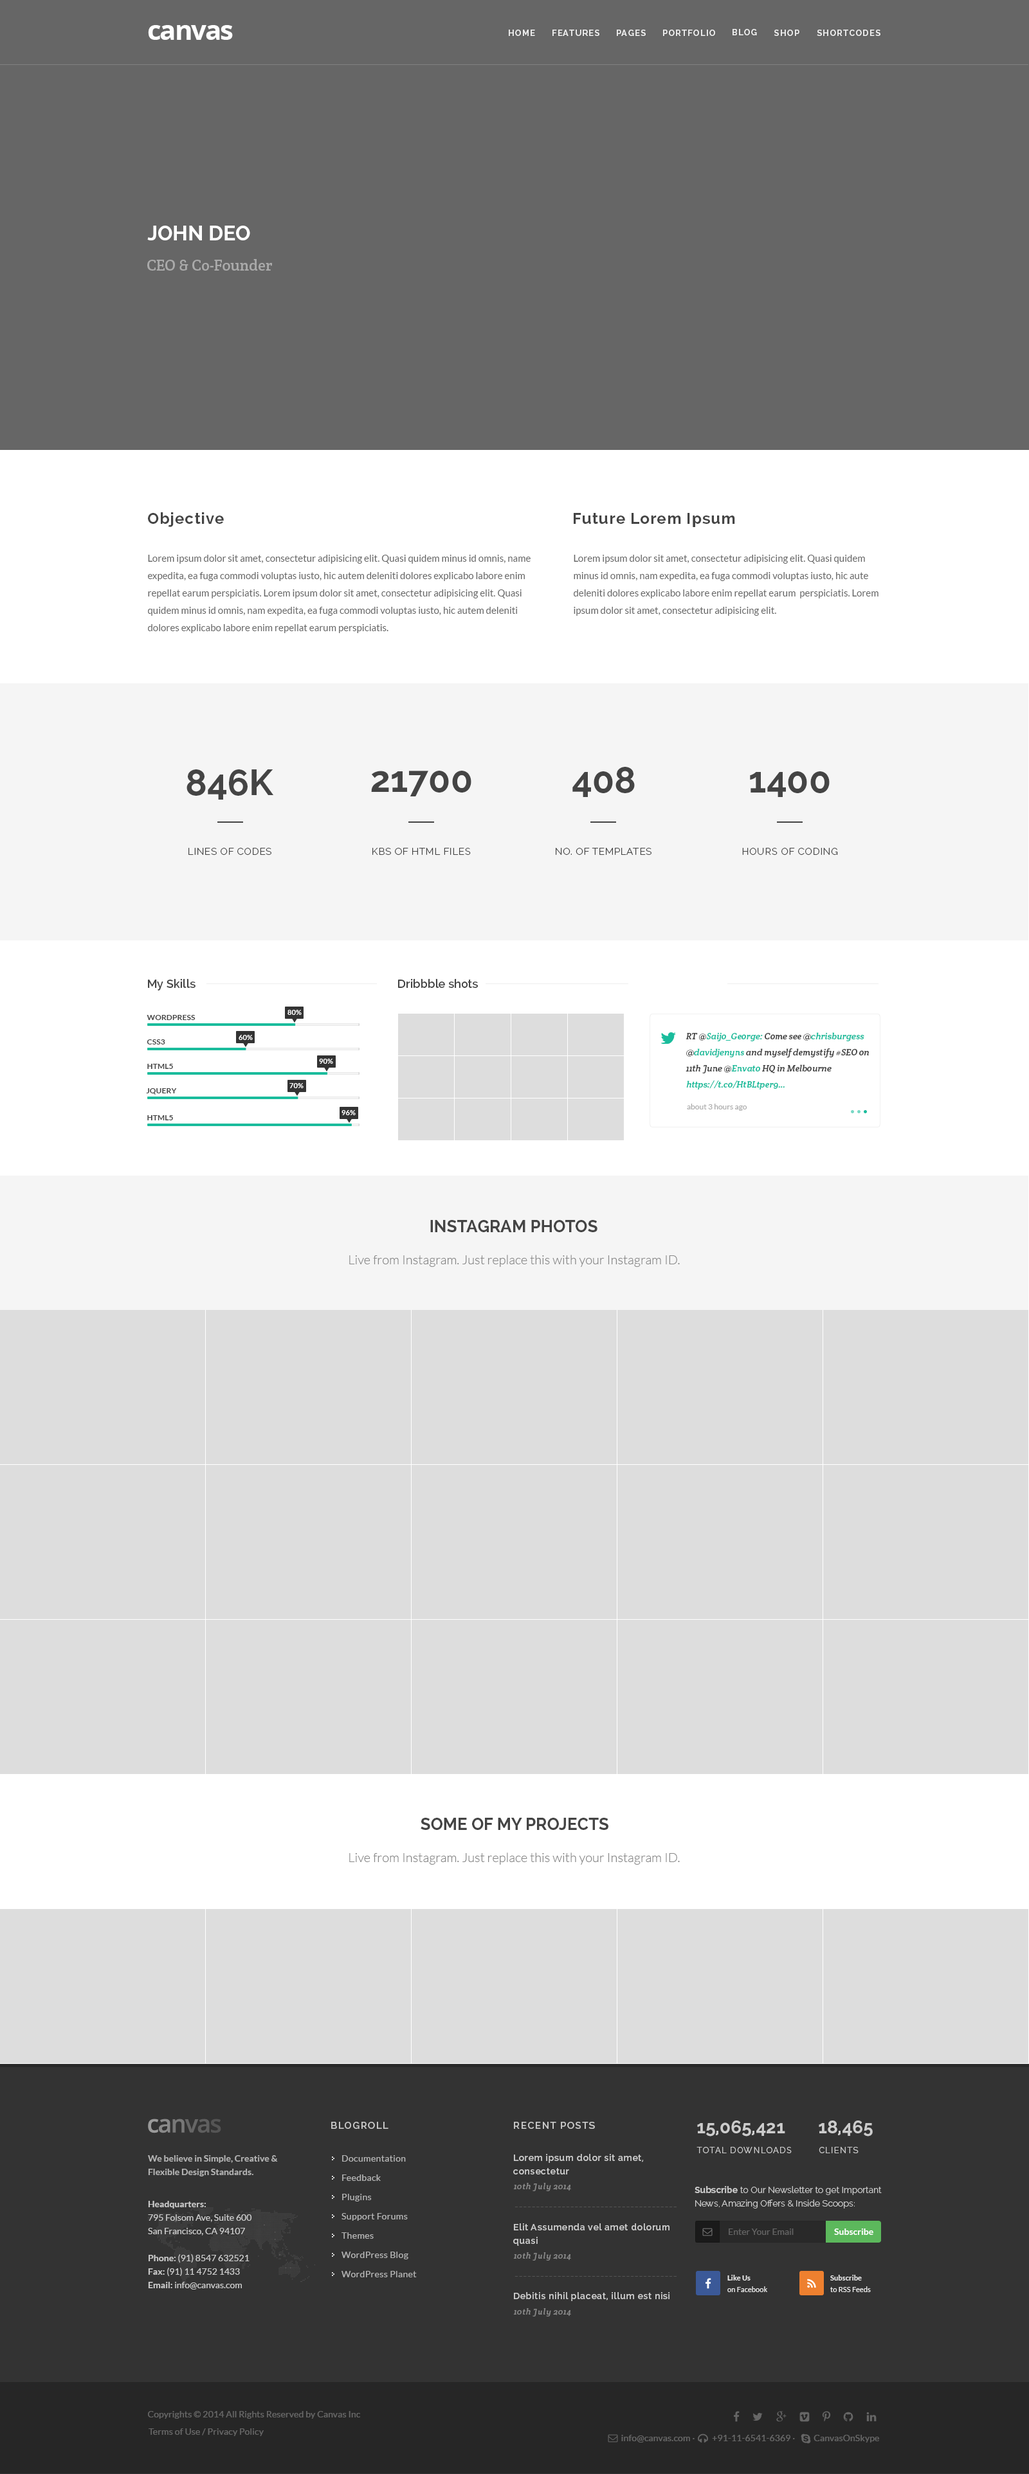
<style>
.page{position:relative;width:1029px;height:2474px;background:#dddddd}
.page>*{position:absolute;margin:0}
.t1{font:27px "OpenSans-Bold";letter-spacing:-0.05em;color:#ffffff}
.t2{font:8.4px "Raleway-Bold";letter-spacing:0.1em;color:#eeeeee}
.t3{font:20.6px "Raleway-Bold";color:#ffffff;text-transform:uppercase}
.t4{font:15.4px "CreteRound-Regular";color:#aaaaaa}
.t5{font:15.4px "Raleway-Bold";letter-spacing:0.05em;color:#444444}
.t6{font:9.6px/17.4px "Lato-Regular";color:#666666}
.t7{font:36px "Raleway-Bold";color:#444444}
.t8{font:9.6px "Raleway-Light";letter-spacing:0.05em;color:#444444}
.t9{font:11.6px "Raleway-SemiBold";letter-spacing:0.005em;color:#444444}
.t10{font:7.1px "Lato-Bold";letter-spacing:0.01em;color:#ffffff;text-transform:uppercase}
.t11{font:7.7px "Lato-Bold";letter-spacing:0.01em;color:#444444;text-transform:uppercase}
.t12{font:9px/16.1px "CreteRound-Italic";color:#444444}
.t13{font:9px/16.1px "CreteRound-Italic";color:#1abc9c}
.t14{font:7.7px "Lato-Regular";color:#aaaaaa}
.t15{font:16.7px "Raleway-Bold";color:#444444}
.t16{font:12.9px "Lato-Light";color:#888888}
.t17{font:9.6px "Raleway-SemiBold";letter-spacing:0.1em;color:#cccccc}
.t18{font:18px "Raleway-Bold";color:#cccccc}
.t19{font:8.4px "Raleway-Regular";letter-spacing:0.1em;color:#cacaca;text-transform:uppercase}
.t20{font:9px/13.5px "Lato-Bold";color:#cccccc}
.t21{font:9px/19.3px "Lato-Regular";letter-spacing:0.025em;color:#cccccc}
.t22{font:9px/13.5px "Raleway-SemiBold";letter-spacing:0.05em;color:#cccccc}
.t23{font:8.4px "CreteRound-Italic";letter-spacing:0.05em;color:#888888}
.t24{font:9px/13.5px "Raleway-Light";color:#cccccc}
.t25{font:9px/13.5px "Raleway-Bold";color:#cccccc}
.t26{font:9px/13.5px "Lato-Regular";color:#cccccc}
.t27{font:11.6px "Lato-Italic";letter-spacing:0.05em;color:#545454}
.t28{font:9px "Lato-Regular";color:#777777}
.t29{font:9px "Lato-Bold";color:#ffffff}
.t30{font:7.1px/11.6px "Lato-Regular";letter-spacing:0.01em;color:#eeeeee}
.t31{font:7.1px/11.6px "Lato-Bold";letter-spacing:0.01em;color:#eeeeee}
.t32{font:9px "Raleway-SemiBold";letter-spacing:0.05em;color:#cccccc}
.t33{font:9px "Lato-Regular";letter-spacing:0.01em;color:#666666}
</style>
<div class="page">
<p class="t1" style="left:148px;top:25px;width:85px;height:15px">canvas</p>
<p class="t2" style="left:509px;top:30px;width:26px;height:6px">HOME</p>
<p class="t2" style="left:552px;top:30px;width:47px;height:6px">FEATURES</p>
<p class="t2" style="left:616px;top:30px;width:29px;height:6px">PAGES</p>
<p class="t2" style="left:663px;top:30px;width:52px;height:6px">PORTFOLIO</p>
<p class="t2" style="left:732px;top:29px;width:25px;height:6px">BLOG</p>
<p class="t2" style="left:774px;top:30px;width:25px;height:6px">SHOP</p>
<p class="t2" style="left:816px;top:30px;width:64px;height:6px">SHORTCODES</p>
<p class="t3" style="left:147px;top:226px;width:103px;height:14px">John Deo</p>
<p class="t4" style="left:147px;top:259px;width:125px;height:12px">CEO &amp; Co-Founder</p>
<p class="t5" style="left:148px;top:512px;width:76px;height:15px">Objective</p>
<p class="t5" style="left:573px;top:513px;width:162px;height:14px">Future Lorem Ipsum</p>
<p class="t6" style="left:148px;top:555px;width:382px;height:78px">Lorem ipsum dolor sit amet, consectetur adipisicing elit. Quasi quidem minus id omnis, name<br>expedita, ea fuga commodi voluptas iusto, hic autem deleniti dolores explicabo labore enim<br>repellat earum perspiciatis. Lorem ipsum dolor sit amet, consectetur adipisicing elit. Quasi<br>quidem minus id omnis, nam expedita, ea fuga commodi voluptas iusto, hic autem deleniti<br>dolores explicabo labore enim repellat earum perspiciatis.</p>
<p class="t6" style="left:573px;top:555px;width:305px;height:61px">Lorem ipsum dolor sit amet, consectetur adipisicing elit. Quasi quidem<br>minus id omnis, nam expedita, ea fuga commodi voluptas iusto, hic aute<br>deleniti dolores explicabo labore enim repellat earum  perspiciatis. Lorem<br>ipsum dolor sit amet, consectetur adipisicing elit.</p>
<p class="t7" style="left:186px;top:770px;width:88px;height:30px">846K</p>
<p class="t7" style="left:371px;top:771px;width:100px;height:26px">21700</p>
<p class="t7" style="left:572px;top:767px;width:62px;height:30px">408</p>
<p class="t7" style="left:750px;top:771px;width:79px;height:26px">1400</p>
<p class="t8" style="left:188px;top:848px;width:83px;height:7px">LINES OF CODES</p>
<p class="t8" style="left:372px;top:848px;width:99px;height:7px">KBS OF HTML FILES</p>
<p class="t8" style="left:555px;top:848px;width:96px;height:7px">NO. OF TEMPLATES</p>
<p class="t8" style="left:742px;top:848px;width:96px;height:7px">HOURS OF CODING</p>
<p class="t9" style="left:148px;top:979px;width:47px;height:12px">My Skills</p>
<p class="t9" style="left:398px;top:979px;width:80px;height:9px">Dribbble shots</p>
<p class="t10" style="left:287px;top:1010px;width:15px;height:5px">80%</p>
<p class="t11" style="left:147px;top:1015px;width:48px;height:5px">Wordpress</p>
<p class="t10" style="left:239px;top:1035px;width:14px;height:5px">60%</p>
<p class="t12" style="left:685px;top:1032px;width:184px;height:58px">RT @<span class="t13">Saijo_George:</span> Come see @<span class="t13">chrisburgess</span><br>@<span class="t13">davidjenyns</span> and myself demystify #SEO on<br>11th June @<span class="t13">Envato</span> HQ in Melbourne<br><span class="t13">https://t.co/HtBLtper9…</span></p>
<p class="t11" style="left:147px;top:1040px;width:18px;height:5px">CSs3</p>
<p class="t10" style="left:319px;top:1059px;width:14px;height:5px">90%</p>
<p class="t11" style="left:147px;top:1064px;width:26px;height:5px">HTML5</p>
<p class="t10" style="left:289px;top:1083px;width:14px;height:5px">70%</p>
<p class="t11" style="left:146px;top:1088px;width:31px;height:7px">JQUERY</p>
<p class="t14" style="left:687px;top:1104px;width:60px;height:7px">about 3 hours ago</p>
<p class="t11" style="left:147px;top:1115px;width:26px;height:5px">HTML5</p>
<p class="t10" style="left:341px;top:1110px;width:15px;height:5px">96%</p>
<p class="t15" style="left:430px;top:1220px;width:167px;height:12px">INSTAGRAM PHOTOS</p>
<p class="t16" style="left:349px;top:1255px;width:331px;height:12px">Live from Instagram. Just replace this with your Instagram ID.</p>
<p class="t15" style="left:420px;top:1818px;width:188px;height:12px">SOME OF MY PROJECTS</p>
<p class="t16" style="left:349px;top:1853px;width:331px;height:12px">Live from Instagram. Just replace this with your Instagram ID.</p>
<p class="t17" style="left:331px;top:2122px;width:57px;height:7px">BLOGROLL</p>
<p class="t17" style="left:514px;top:2122px;width:81px;height:7px">RECENT POSTS</p>
<p class="t18" style="left:697px;top:2121px;width:88px;height:16px">15,065,421</p>
<p class="t18" style="left:818px;top:2121px;width:54px;height:16px">18,465</p>
<p class="t19" style="left:696px;top:2147px;width:95px;height:7px">TOTAL Downloads</p>
<p class="t19" style="left:818px;top:2147px;width:40px;height:7px">CLIENTS</p>
<p class="t20" style="left:148px;top:2156px;width:130px;height:21px;opacity:0.8">We believe in Simple, Creative &amp;<br>Flexible Design Standards.</p>
<p class="t21" style="left:341px;top:2156px;width:76px;height:122px;opacity:0.8">Documentation<br>Feedback<br>Plugins<br>Support Forums<br>Themes<br>WordPress Blog<br>WordPress Planet</p>
<p class="t22" style="left:513px;top:2154px;width:130px;height:21px">Lorem ipsum dolor sit amet,<br>consectetur</p>
<p class="t23" style="left:513px;top:2183px;width:58px;height:9px">10th July 2014</p>
<p class="t24" style="left:694px;top:2186px;width:187px;height:23px"><span class="t25">Subscribe</span> to Our Newsletter to get Important<br>News, Amazing Offers &amp; Inside Scoops:</p>
<p class="t26" style="left:148px;top:2201px;width:104px;height:89px"><span class="t20">Headquarters:<br></span>795 Folsom Ave, Suite 600<br>San Francisco, CA 94107<br><span class="t20"><br>Phone: </span>(91) 8547 632521<br><span class="t20">Fax: </span>(91) 11 4752 1433<br><span class="t20">Email: </span>info@canvas.com</p>
<p class="t27" style="left:514px;top:2207px;width:162px;height:1px">--------------------------------------</p>
<p class="t22" style="left:513px;top:2224px;width:156px;height:22px">Elit Assumenda vel amet dolorum<br>quasi</p>
<p class="t28" style="left:728px;top:2229px;width:65px;height:6px;opacity:0.7">Enter Your Email</p>
<p class="t29" style="left:834px;top:2229px;width:39px;height:6px">Subscribe</p>
<p class="t23" style="left:513px;top:2253px;width:58px;height:8px">10th July 2014</p>
<p class="t27" style="left:514px;top:2276px;width:162px;height:1px">--------------------------------------</p>
<p class="t30" style="left:727px;top:2275px;width:40px;height:17px"><span class="t31">Like Us<br></span>on Facebook</p>
<p class="t30" style="left:830px;top:2275px;width:40px;height:17px"><span class="t31">Subscribe<br></span>to RSS Feeds</p>
<p class="t32" style="left:514px;top:2292px;width:155px;height:9px">Debitis nihil placeat, illum est nisi</p>
<p class="t23" style="left:513px;top:2308px;width:58px;height:9px">10th July 2014</p>
<p class="t33" style="left:148px;top:2411px;width:212px;height:8px">Copyrights © 2014 All Rights Reserved by Canvas Inc</p>
<p class="t33" style="left:148px;top:2429px;width:116px;height:7px">Terms of Use / Privacy Policy</p>
<p class="t33" style="left:621px;top:2435px;width:258px;height:8px">info@canvas.com ·   +91-11-6541-6369 ·        CanvasOnSkype</p>
</div>
